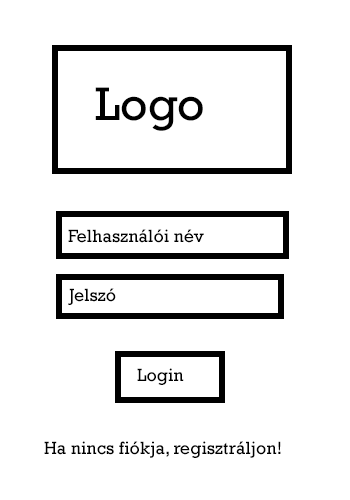
<style>
.page{position:relative;width:350px;height:500px;background:#ffffff}
.page>*{position:absolute;margin:0}
.t1{font:48px "Rockwell";color:#000000}
.t2{font:18px "Rockwell";color:#000000}
</style>
<div class="page">
<p class="t1" style="left:95px;top:87px;width:108px;height:44px">Logo</p>
<p class="t2" style="left:68px;top:229px;width:136px;height:14px">Felhasználói név</p>
<p class="t2" style="left:68px;top:288px;width:48px;height:17px">Jelszó</p>
<p class="t2" style="left:137px;top:368px;width:47px;height:17px">Login</p>
<p class="t2" style="left:44px;top:441px;width:237px;height:17px">Ha nincs fiókja, regisztráljon!</p>
</div>
